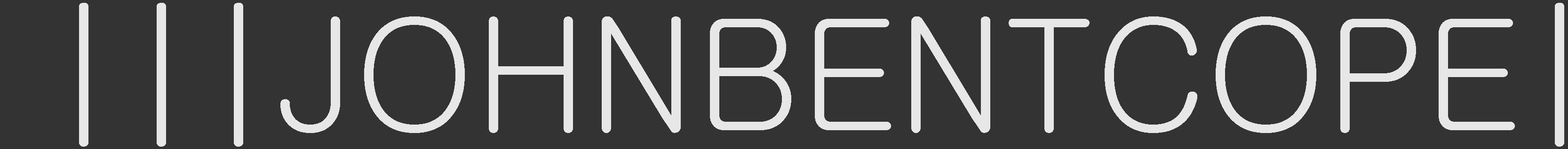
<style>
.page{position:relative;width:1568px;height:149px;background:#333333}
.page>*{position:absolute;margin:0}
.t1{font:155px "Gulim";color:#e7e7e7}
</style>
<div class="page">
<p class="t1" style="left:79px;top:3px;width:1485px;height:144px">|||JOHNBENTCOPE|</p>
</div>
